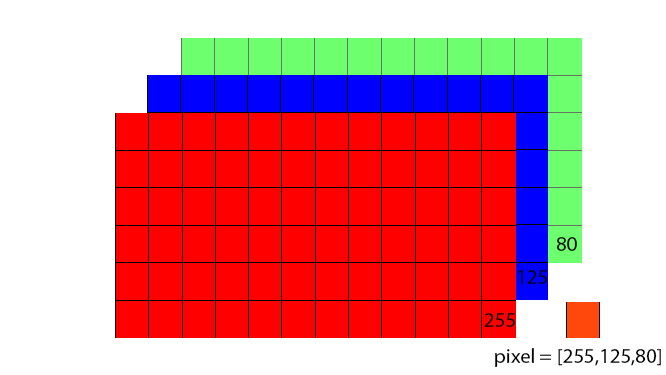
<style>
.page{position:relative;width:666px;height:375px;background:#ffffff}
.page>*{position:absolute;margin:0}
.t1{font:20.8px "MyriadPro-Regular";color:#000000}
</style>
<div class="page">
<p class="t1" style="left:556px;top:237px;width:21px;height:14px">80</p>
<p class="t1" style="left:518px;top:270px;width:29px;height:14px">125</p>
<p class="t1" style="left:484px;top:313px;width:31px;height:14px">255</p>
<p class="t1" style="left:495px;top:348px;width:166px;height:19px">pixel = [255,125,80]</p>
</div>
